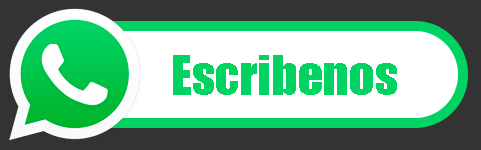
<style>
.page{position:relative;width:481px;height:150px;background:#333333}
.page>*{position:absolute;margin:0}
.t1{font:50px "Impact";color:#00d361}
</style>
<div class="page">
<p class="t1" style="left:173px;top:55px;width:224px;height:40px">Escribenos</p>
</div>
